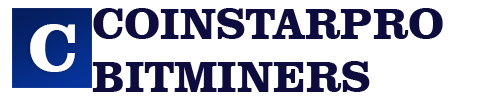
<style>
.page{position:relative;width:500px;height:100px;background:#ffffff}
.page>*{position:absolute;margin:0}
.t1{font:44px "ClarendonBT-Bold";color:#0e0c3d;text-transform:uppercase}
.t2{font:68px "ClarendonBT-Bold";color:#ffffff;text-transform:uppercase}
</style>
<div class="page">
<p class="t1" style="left:92px;top:8px;width:351px;height:84px">Coinstarpro<br>Bitminers</p>
<p class="t2" style="left:30px;top:24px;width:45px;height:48px">C</p>
</div>
